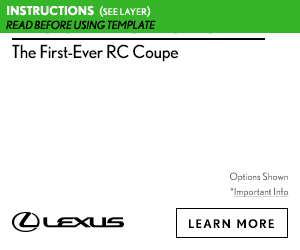
<style>
.page{position:relative;width:300px;height:250px;background:#ffffff}
.page>*{position:absolute;margin:0}
.t1{font:18px "Nobel-Regular";letter-spacing:-0.025em;color:#000000}
.t2{font:10px "Nobel-Book";letter-spacing:0.01em}
.t3{font:10px "Nobel-Book";letter-spacing:0.01em;text-decoration:underline}
.t4{font:12px "Nobel-Bold";letter-spacing:0.085em;color:#000000;text-transform:uppercase}
</style>
<div class="page">
<p class="t1" style="left:12px;top:44px;width:167px;height:18px">The First-Ever RC Coupe</p>
<p class="t2" style="left:230px;top:172px;width:58px;height:10px">Options Shown</p>
<p class="t3" style="left:230px;top:187px;width:59px;height:10px"><span class="t2">*</span>Important Info</p>
<p class="t3" style="left:230px;top:187px;width:59px;height:10px"><span class="t2">*</span>Important Info</p>
<p class="t4" style="left:189px;top:219px;width:85px;height:10px">learn more</p>
</div>
